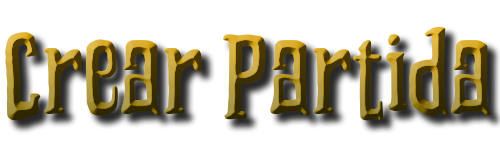
<style>
.page{position:relative;width:500px;height:156px;background:#ffffff}
.page>*{position:absolute;margin:0}
.t1{font:130.3px "Grooving";scale:1.03 1}
</style>
<div class="page">
<p class="t1" style="left:5px;top:27px;width:486px;height:94px">Crear Partida</p>
</div>
